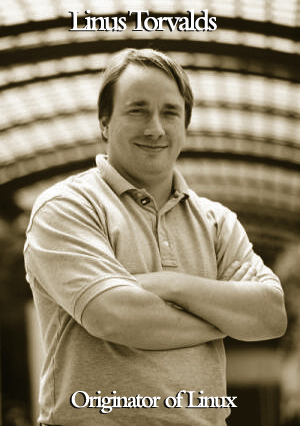
<style>
.page{position:relative;width:300px;height:426px}
.page>*{position:absolute;margin:0}
.t1{font:31.2px "BemboMT-SemiBold";letter-spacing:-0.08em;color:#ffffff;scale:0.95 1}
.t2{font:25px "BemboMT-SemiBold";letter-spacing:-0.08em;color:#ffffff;scale:0.95 1}
</style>
<div class="page">
<p class="t1" style="left:70px;top:9px;width:147px;height:22px">Linus Torvalds</p>
<p class="t2" style="left:71px;top:390px;width:167px;height:23px">Originator of Linux</p>
</div>
